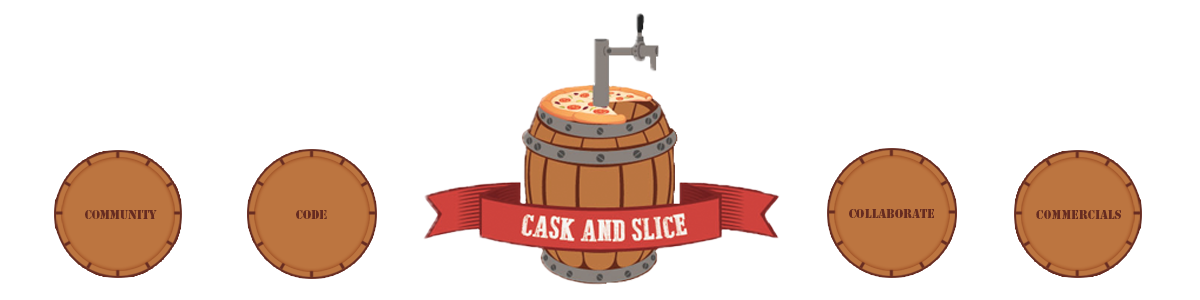
<style>
.page{position:relative;width:1200px;height:300px;background:#ffffff}
.page>*{position:absolute;margin:0}
.t1{font:11.5px "StencilStd";color:#672c21}
.t2{font:11.3px "StencilStd";color:#672c21}
</style>
<div class="page">
<p class="t1" style="left:849px;top:209px;width:85px;height:9px">Collaborate</p>
<p class="t2" style="left:85px;top:210px;width:72px;height:9px">COMMUNITY</p>
<p class="t1" style="left:296px;top:210px;width:31px;height:9px">CODE</p>
<p class="t2" style="left:1036px;top:210px;width:85px;height:9px">CommercialS</p>
</div>
